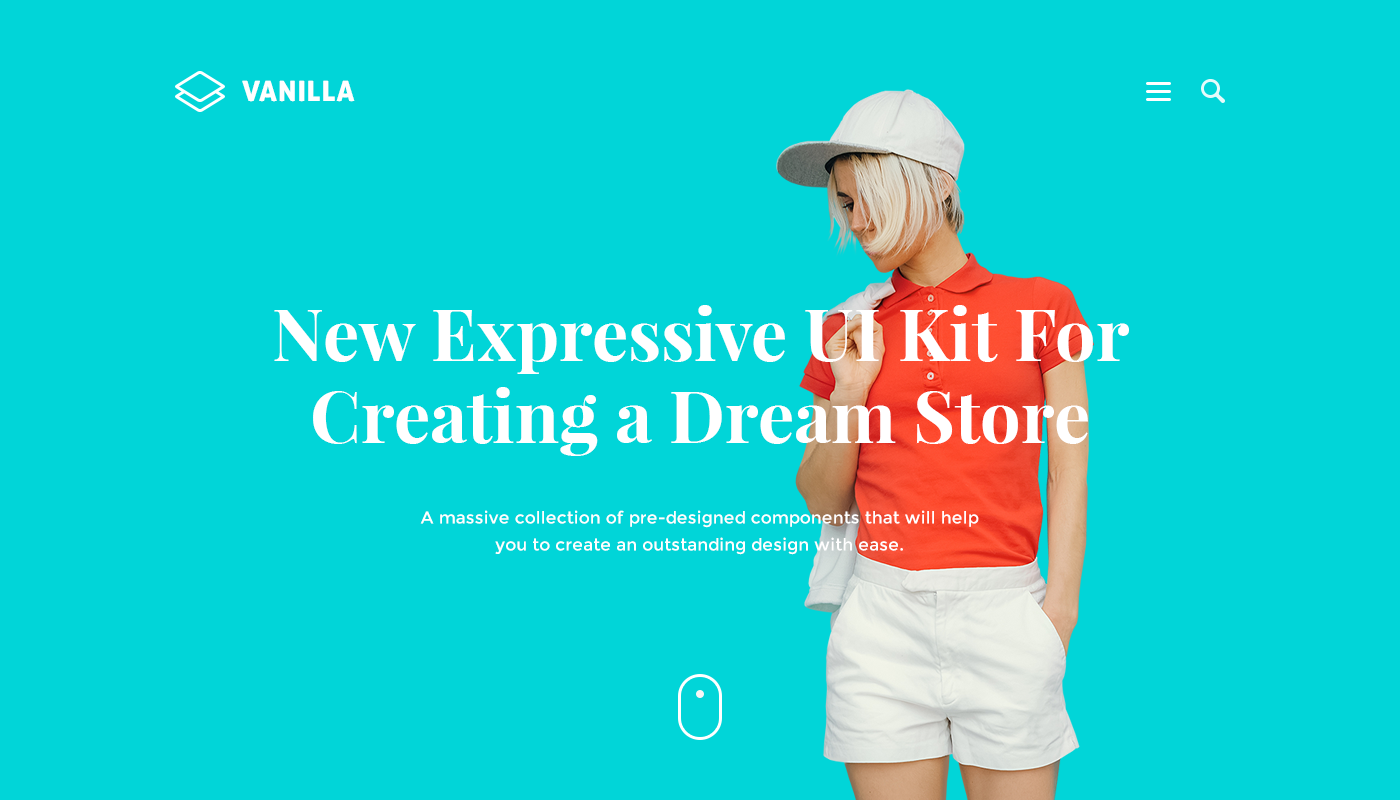
<style>
.page{position:relative;width:1400px;height:800px;background:#01d5d8}
.page>*{position:absolute;margin:0}
.t1{font:28px "AllerDisplay";letter-spacing:0.04em;color:#ffffff;text-transform:uppercase}
.t2{font:72px/82px "PlayfairDisplay-Bold";color:#ffffff}
.t3{font:17px/27px "Montserrat-Regular";color:#ffffff}
</style>
<div class="page">
<p class="t1" style="left:242px;top:80px;width:113px;height:22px">Vanilla</p>
<p class="t2" style="left:274px;top:305px;width:855px;height:151px;text-align:center">New Expressive UI Kit For Creating a Dream Store</p>
<p class="t3" style="left:420px;top:510px;width:559px;height:45px;text-align:center">A massive collection of pre-designed components that will help you to create an outstanding design with ease.</p>
</div>
